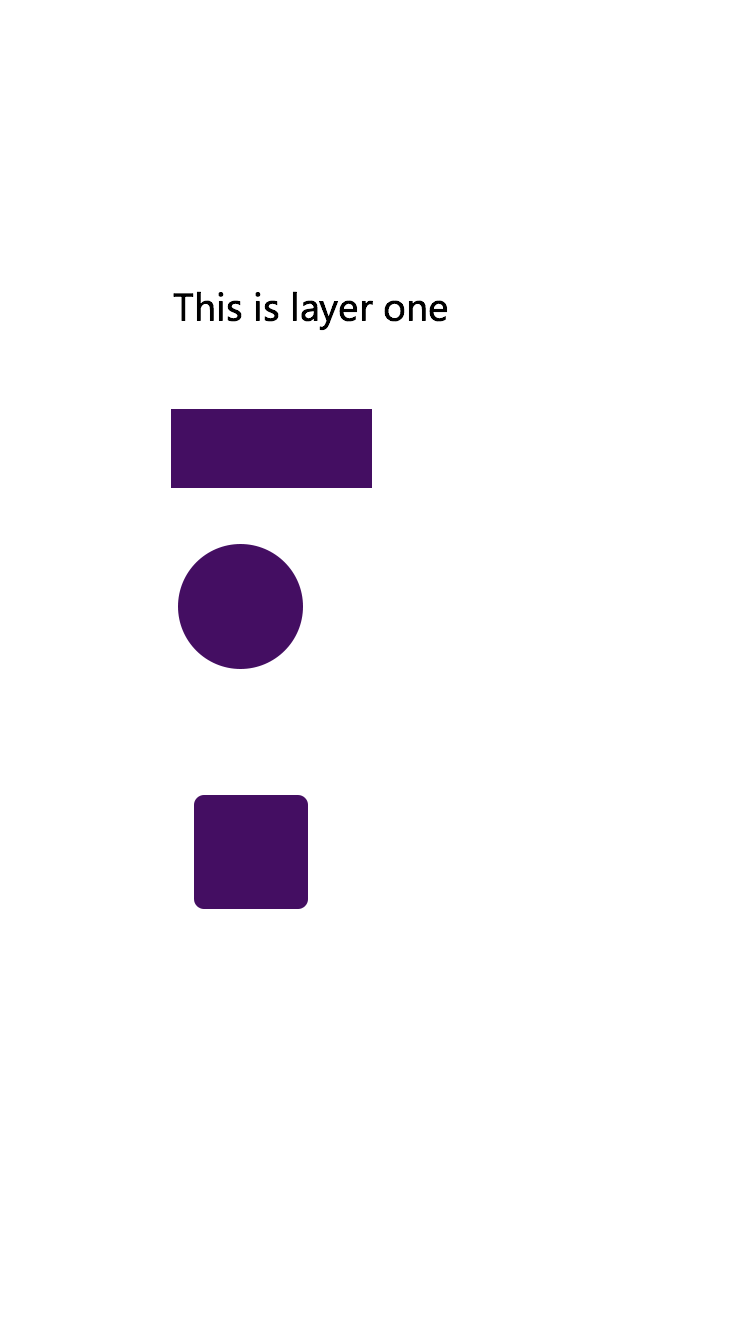
<style>
.page{position:relative;width:750px;height:1334px;background:#ffffff}
.page>*{position:absolute;margin:0}
.t1{font:36px "MicrosoftYaHei";color:#000000}
</style>
<div class="page">
<p class="t1" style="left:173px;top:291px;width:275px;height:40px">This is layer one</p>
</div>
